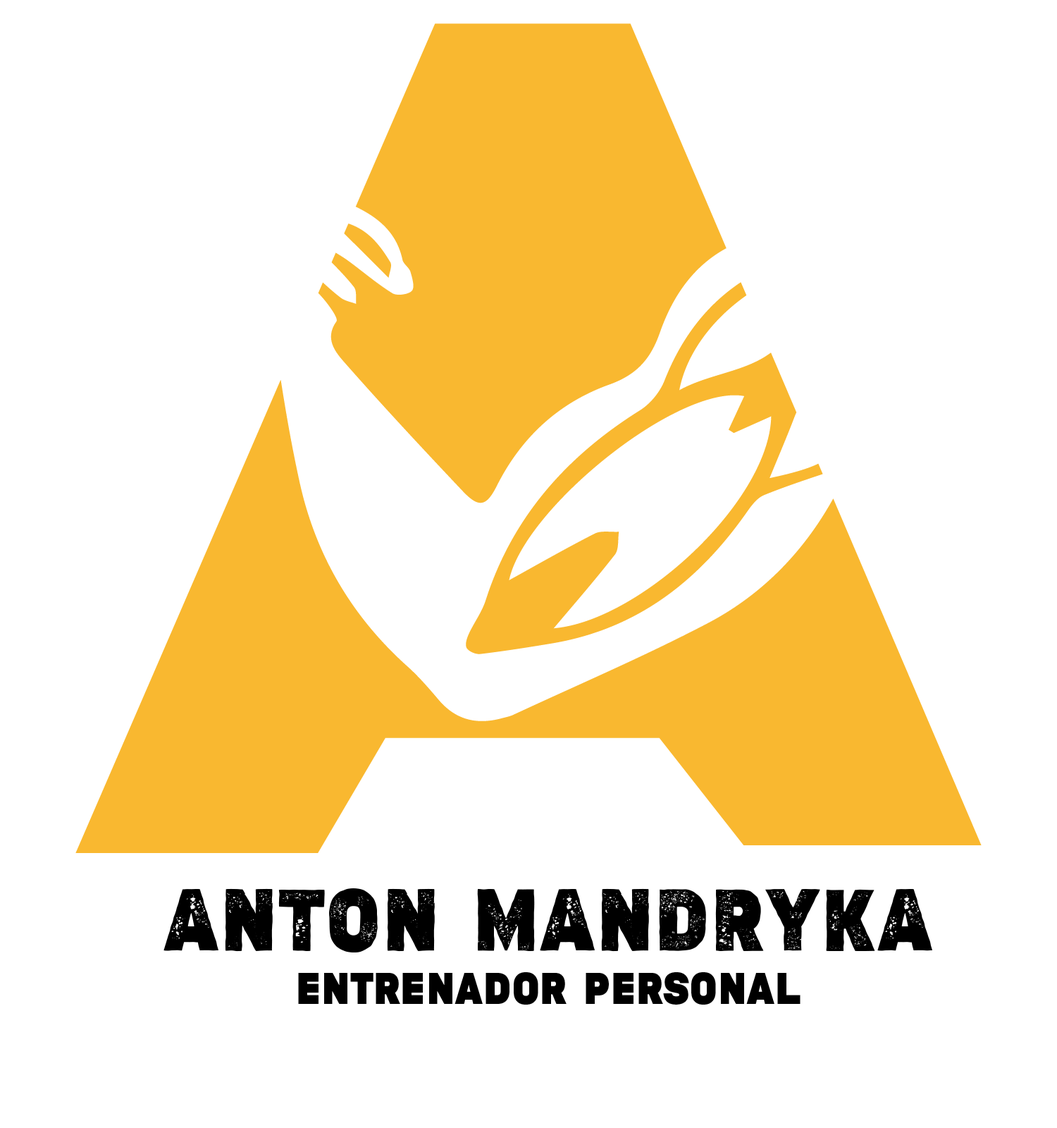
<style>
.page{position:relative;width:1057px;height:1128px;background:#ffffff}
.page>*{position:absolute;margin:0}
.t1{font:44.1px "MEDIOVINTAGE-Regular";color:#000000}
.t2{font:88.1px "MEDIOVINTAGEROUGH-Regular";color:#000000}
</style>
<div class="page">
<p class="t1" style="left:164px;top:888px;width:769px;height:116px;text-align:center"><span class="t2">ANTON MANDrYKA<br></span>ENTRENADOR PERSONAL</p>
</div>
